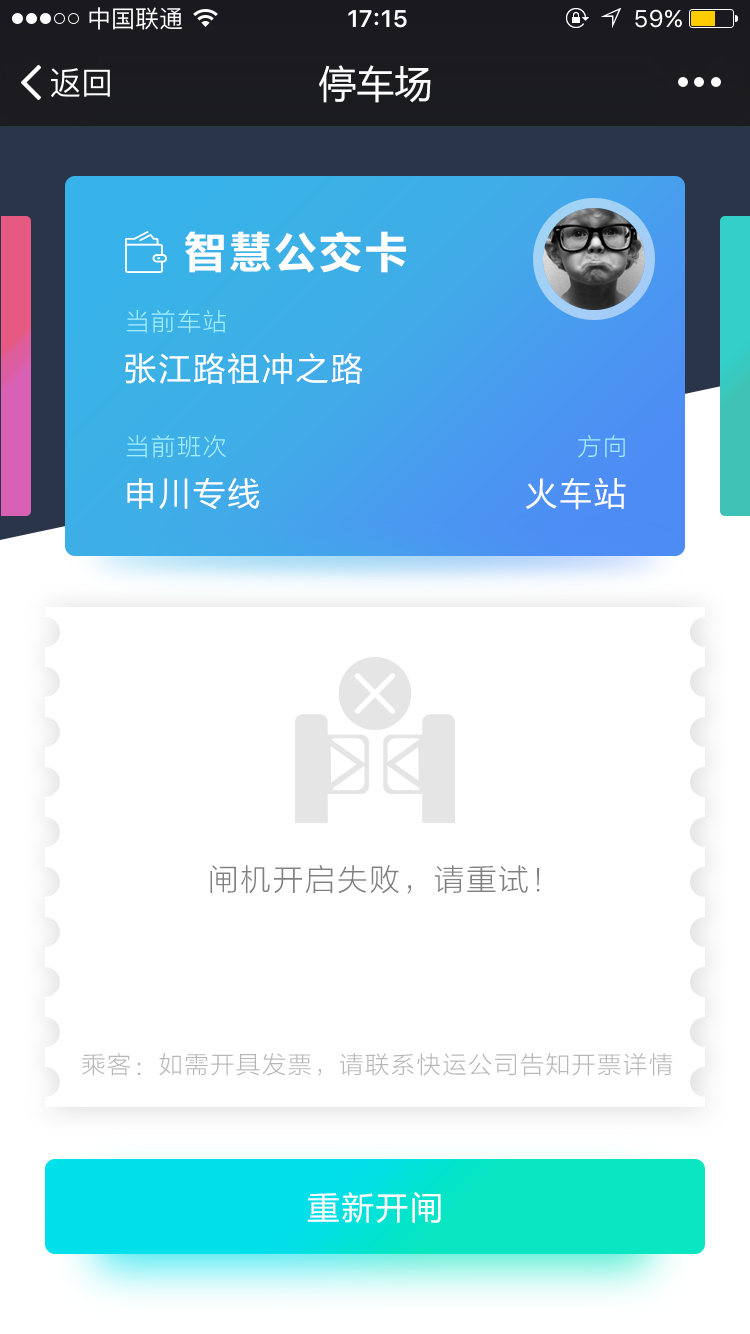
<style>
.page{position:relative;width:750px;height:1334px;background:#ffffff}
.page>*{position:absolute;margin:0}
.t1{font:38px "MicrosoftYaHei";color:#ffffff}
.t2{font:42px "MicrosoftYaHei-Bold";letter-spacing:0.075em;color:#ffffff}
.t3{font:24px "FZLTXHK--GBK1-0";letter-spacing:0.075em;color:#a4efff}
.t4{font:32px "MicrosoftYaHei";letter-spacing:0.075em;color:#ffffff}
.t5{font:30px "FZLTXHK--GBK1-0";letter-spacing:0.075em;color:#808080}
.t6{font:24px "FZLTXHK--GBK1-0";letter-spacing:0.075em;color:#b7b7b7}
</style>
<div class="page">
<p class="t1" style="left:319px;top:65px;width:112px;height:38px">停车场</p>
<p class="t2" style="left:185px;top:231px;width:221px;height:42px">智慧公交卡</p>
<p class="t3" style="left:126px;top:310px;width:100px;height:23px">当前车站</p>
<p class="t4" style="left:125px;top:353px;width:238px;height:31px">张江路祖冲之路</p>
<p class="t3" style="left:126px;top:435px;width:100px;height:23px">当前班次</p>
<p class="t3" style="left:578px;top:435px;width:47px;height:23px">方向</p>
<p class="t4" style="left:127px;top:478px;width:133px;height:32px">申川专线</p>
<p class="t4" style="left:525px;top:477px;width:101px;height:33px">火车站</p>
<p class="t5" style="left:210px;top:865px;width:330px;height:29px">闸机开启失败，请重试！</p>
<p class="t6" style="left:82px;top:1053px;width:591px;height:23px">乘客：如需开具发票，请联系快运公司告知开票详情</p>
<p class="t4" style="left:307px;top:1192px;width:134px;height:31px">重新开闸</p>
</div>
